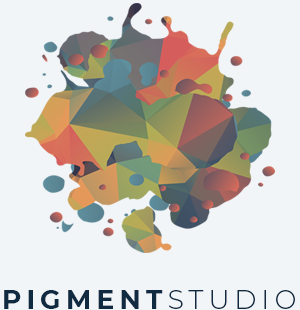
<style>
.page{position:relative;width:300px;height:310px;background:#f1f5f8}
.page>*{position:absolute;margin:0}
.t1{font:26.4px "Montserrat-Bold";letter-spacing:0.2em;color:#102a42}
.t2{font:26.4px "Montserrat-Light";letter-spacing:0.2em;color:#102a42}
</style>
<div class="page">
<p class="t1" style="left:4px;top:290px;width:291px;height:19px">PIGMENT<span class="t2">STUDIO</span></p>
</div>
